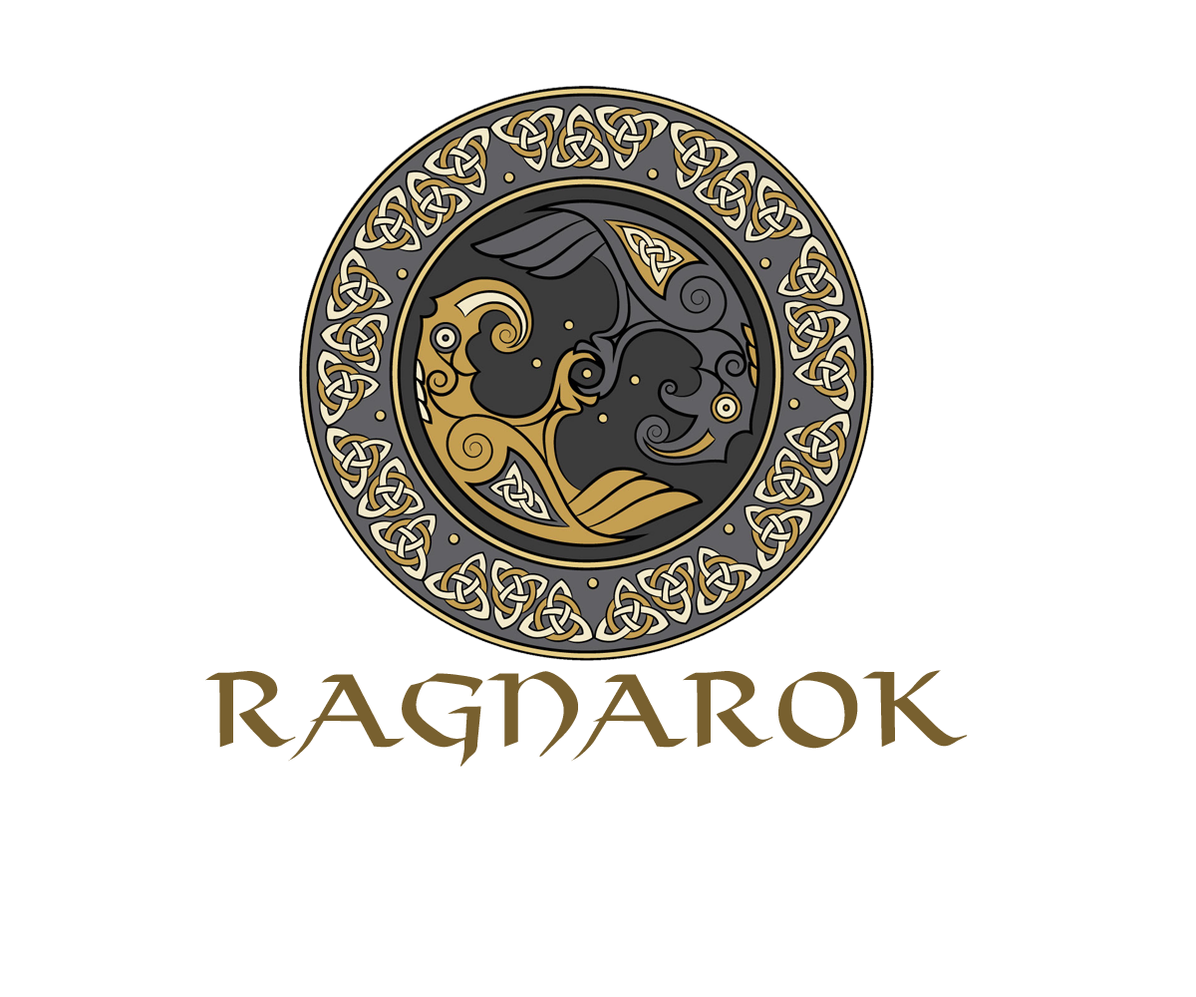
<style>
.page{position:relative;width:1196px;height:997px;background:#ffffff}
.page>*{position:absolute;margin:0}
.t1{font:99.7px "Viking-Normal";color:#78602f}
</style>
<div class="page">
<p class="t1" style="left:205px;top:670px;width:763px;height:97px">Ragnarok</p>
</div>
